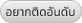
<style>
.page{position:relative;width:82px;height:23px}
.page>*{position:absolute;margin:0}
.t1{font:12px "NotoSansThai-Regular";color:#272727}
</style>
<div class="page">
<p class="t1" style="left:6px;top:6px;width:69px;height:10px">อยากติดอันดับ</p>
</div>
